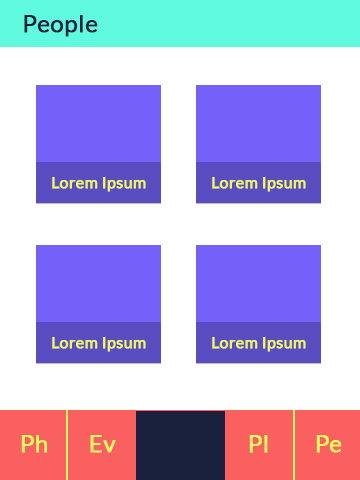
<style>
.page{position:relative;width:360px;height:480px;background:#ffffff}
.page>*{position:absolute;margin:0}
.t1{font:24px "Lato-Regular";color:#18213d;font-weight:bold}
.t2{font:16px "Lato-Regular";color:#f1fa60;font-weight:bold}
.t3{font:24px "Lato-Regular";color:#f1fa60;font-weight:bold}
</style>
<div class="page">
<p class="t1" style="left:24px;top:15px;width:74px;height:22px">People</p>
<p class="t2" style="left:52px;top:177px;width:94px;height:15px">Lorem Ipsum</p>
<p class="t2" style="left:212px;top:177px;width:94px;height:15px">Lorem Ipsum</p>
<p class="t2" style="left:52px;top:337px;width:94px;height:15px">Lorem Ipsum</p>
<p class="t2" style="left:212px;top:337px;width:94px;height:15px">Lorem Ipsum</p>
<p class="t3" style="left:21px;top:435px;width:26px;height:18px">Ph</p>
<p class="t3" style="left:90px;top:435px;width:26px;height:18px">Ev</p>
<p class="t3" style="left:249px;top:435px;width:19px;height:18px">Pl</p>
<p class="t3" style="left:316px;top:435px;width:26px;height:18px">Pe</p>
</div>
